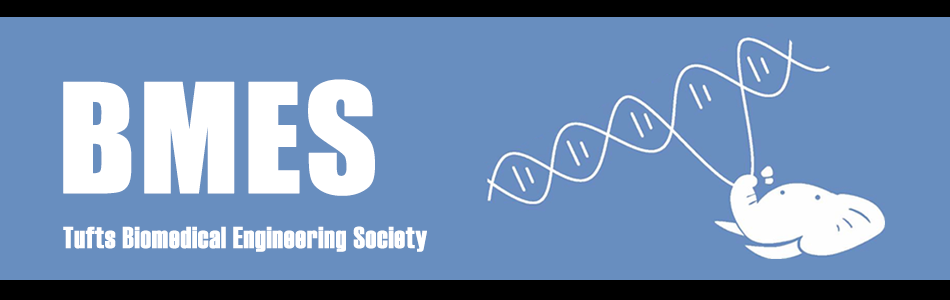
<style>
.page{position:relative;width:950px;height:300px;background:#688ebf}
.page>*{position:absolute;margin:0}
.t1{font:140px "Impact";color:#ffffff;font-weight:bold}
.t2{font:30px "Haettenschweiler";color:#ffffff;font-weight:bold}
</style>
<div class="page">
<p class="t1" style="left:63px;top:79px;width:312px;height:117px">BMES</p>
<p class="t2" style="left:63px;top:226px;width:364px;height:26px">Tufts Biomedical Engineering Society</p>
</div>
